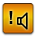
<style>
.page{position:relative;width:36px;height:36px}
.page>*{position:absolute;margin:0}
.t1{font:18px "Arial-BoldMT";color:#000000}
</style>
<div class="page">
<p class="t1" style="left:9px;top:11px;width:4px;height:13px">!</p>
</div>
